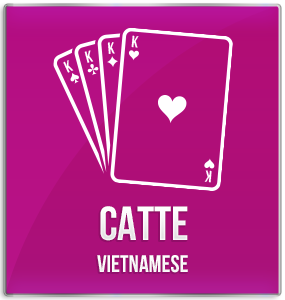
<style>
.page{position:relative;width:285px;height:300px}
.page>*{position:absolute;margin:0}
.t1{font:48px "BebasNeueBold";color:#ffffff;text-transform:uppercase}
.t2{font:24px "BebasNeueBold";color:#ffffff}
</style>
<div class="page">
<p class="t1" style="left:100px;top:206px;width:88px;height:35px">catte</p>
<p class="t2" style="left:97px;top:255px;width:91px;height:18px">vietnamese</p>
</div>
